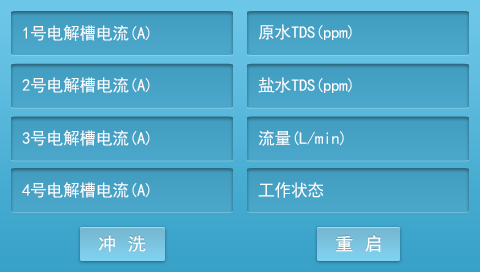
<style>
.page{position:relative;width:480px;height:272px}
.page>*{position:absolute;margin:0}
.t1{font:16.7px "SimHei";letter-spacing:-0.02em;color:#ffffff}
.t2{font:18px "SimHei";letter-spacing:0.05em;color:#ffffff}
</style>
<div class="page">
<p class="t1" style="left:23px;top:25px;width:127px;height:16px">1号电解槽电流(A)</p>
<p class="t1" style="left:258px;top:24px;width:94px;height:16px">原水TDS(ppm)</p>
<p class="t1" style="left:22px;top:77px;width:128px;height:16px">2号电解槽电流(A)</p>
<p class="t1" style="left:258px;top:77px;width:94px;height:16px">盐水TDS(ppm)</p>
<p class="t1" style="left:22px;top:130px;width:128px;height:16px">3号电解槽电流(A)</p>
<p class="t1" style="left:258px;top:130px;width:86px;height:16px">流量(L/min)</p>
<p class="t1" style="left:22px;top:182px;width:128px;height:16px">4号电解槽电流(A)</p>
<p class="t1" style="left:258px;top:182px;width:66px;height:16px">工作状态</p>
<p class="t2" style="left:98px;top:235px;width:48px;height:17px">冲 洗</p>
<p class="t2" style="left:336px;top:235px;width:45px;height:17px">重 启</p>
</div>
